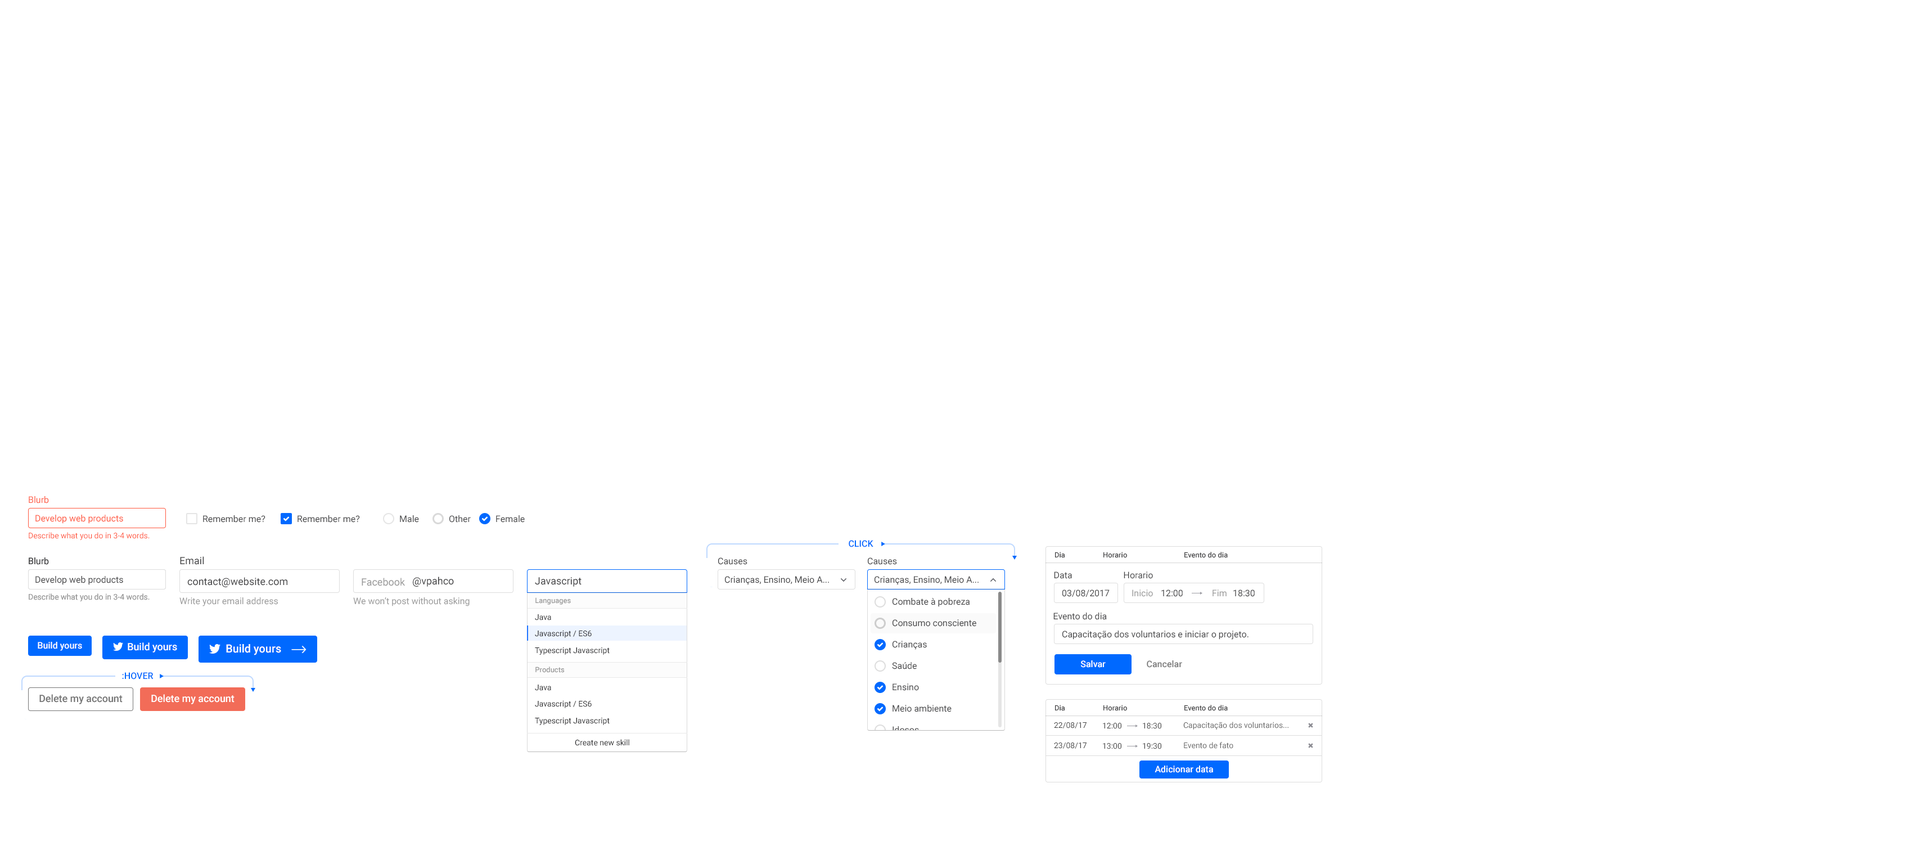
<style>
.page{position:relative;width:1920px;height:864px;background:#ffffff}
.page>*{position:absolute;margin:0}
.t1{font:9px "Roboto-Regular";color:#ff6149}
.t2{font:9px "Roboto-Regular";color:#ff583f}
.t3{font:9px "Roboto-Regular";color:#464648}
.t4{font:7.9px "Roboto-Regular";color:#ff583f}
.t5{font:9px "Roboto-Medium";color:#0069ff;text-transform:uppercase}
.t6{font:10.1px "Roboto-Regular";color:#464648}
.t7{font:7.3px "Roboto-Medium";color:#464648}
.t8{font:10.1px "Roboto-Regular";color:#999999}
.t9{font:7.9px "Roboto-Regular";color:#999999}
.t10{font:9px "Roboto-Regular";color:#999999}
.t11{font:7.3px "Roboto-Medium";color:#999999}
.t12{font:7.9px "Roboto-Regular";color:#262628}
.t13{font:9px "Roboto-Medium";color:#ffffff}
.t14{font:10.1px "Roboto-Medium";color:#ffffff}
.t15{font:11.3px "Roboto-Medium";color:#ffffff}
.t16{font:9px "Roboto-Medium";color:#777777}
.t17{font:10.1px "Roboto-Medium";color:#757575}
.t18{font:7.9px "Roboto-Regular";color:#444444}
.t19{font:7.9px "Roboto-Regular";color:#666666}
.t20{font:9px "Roboto-Regular"}
</style>
<div class="page">
<p class="t1" style="left:29px;top:496px;width:20px;height:7px">Blurb</p>
<p class="t2" style="left:35px;top:515px;width:88px;height:9px">Develop web products</p>
<p class="t3" style="left:203px;top:515px;width:63px;height:8px">Remember me?</p>
<p class="t3" style="left:298px;top:515px;width:62px;height:8px">Remember me?</p>
<p class="t3" style="left:400px;top:515px;width:19px;height:8px">Male</p>
<p class="t3" style="left:449px;top:515px;width:22px;height:8px">Other</p>
<p class="t3" style="left:496px;top:515px;width:29px;height:8px">Female</p>
<p class="t4" style="left:29px;top:532px;width:121px;height:8px">Describe what you do in 3-4 words.</p>
<p class="t5" style="left:849px;top:540px;width:25px;height:7px">click</p>
<p class="t3" style="left:29px;top:557px;width:20px;height:8px">Blurb</p>
<p class="t3" style="left:29px;top:557px;width:20px;height:8px">Blurb</p>
<p class="t6" style="left:180px;top:556px;width:24px;height:9px">Email</p>
<p class="t3" style="left:718px;top:557px;width:30px;height:8px">Causes</p>
<p class="t3" style="left:868px;top:557px;width:29px;height:8px">Causes</p>
<p class="t7" style="left:1055px;top:552px;width:10px;height:6px">Dia</p>
<p class="t7" style="left:1104px;top:552px;width:23px;height:6px">Horario</p>
<p class="t7" style="left:1185px;top:552px;width:43px;height:6px">Evento do dia</p>
<p class="t3" style="left:35px;top:576px;width:88px;height:9px">Develop web products</p>
<p class="t3" style="left:35px;top:576px;width:88px;height:9px">Develop web products</p>
<p class="t6" style="left:187px;top:577px;width:100px;height:10px">contact@website.com</p>
<p class="t8" style="left:362px;top:578px;width:43px;height:8px">Facebook</p>
<p class="t6" style="left:413px;top:577px;width:41px;height:10px">@vpahco</p>
<p class="t6" style="left:535px;top:577px;width:47px;height:10px">Javascript</p>
<p class="t3" style="left:725px;top:576px;width:104px;height:9px">Crianças, Ensino, Meio A...</p>
<p class="t3" style="left:875px;top:576px;width:104px;height:9px">Crianças, Ensino, Meio A...</p>
<p class="t3" style="left:1054px;top:572px;width:18px;height:7px">Data</p>
<p class="t3" style="left:1124px;top:572px;width:29px;height:7px">Horario</p>
<p class="t9" style="left:29px;top:593px;width:121px;height:8px">Describe what you do in 3-4 words.</p>
<p class="t9" style="left:29px;top:593px;width:121px;height:8px">Describe what you do in 3-4 words.</p>
<p class="t3" style="left:1063px;top:590px;width:47px;height:7px">03/08/2017</p>
<p class="t10" style="left:1132px;top:590px;width:21px;height:7px">Inicio</p>
<p class="t3" style="left:1162px;top:590px;width:21px;height:7px">12:00</p>
<p class="t10" style="left:1213px;top:590px;width:14px;height:6px">Fim</p>
<p class="t3" style="left:1234px;top:590px;width:21px;height:7px">18:30</p>
<p class="t10" style="left:179px;top:597px;width:99px;height:9px">Write your email address</p>
<p class="t10" style="left:353px;top:597px;width:117px;height:9px">We won’t post without asking</p>
<p class="t11" style="left:536px;top:597px;width:35px;height:8px">Languages</p>
<p class="t3" style="left:893px;top:598px;width:77px;height:9px">Combate à pobreza</p>
<p class="t12" style="left:535px;top:614px;width:16px;height:6px">Java</p>
<p class="t3" style="left:1054px;top:613px;width:53px;height:7px">Evento do dia</p>
<p class="t12" style="left:535px;top:630px;width:57px;height:8px">Javascript / ES6</p>
<p class="t3" style="left:893px;top:619px;width:83px;height:8px">Consumo consciente</p>
<p class="t13" style="left:38px;top:642px;width:44px;height:9px">Build yours</p>
<p class="t3" style="left:893px;top:641px;width:34px;height:9px">Crianças</p>
<p class="t3" style="left:1063px;top:631px;width:186px;height:9px">Capacitação dos voluntarios e iniciar o projeto.</p>
<p class="t14" style="left:128px;top:642px;width:49px;height:10px">Build yours</p>
<p class="t15" style="left:226px;top:644px;width:55px;height:11px">Build yours</p>
<p class="t12" style="left:535px;top:647px;width:75px;height:8px">Typescript Javascript</p>
<p class="t3" style="left:892px;top:662px;width:25px;height:7px">Saúde</p>
<p class="t13" style="left:1081px;top:660px;width:25px;height:8px">Salvar</p>
<p class="t16" style="left:1147px;top:660px;width:35px;height:8px">Cancelar</p>
<p class="t5" style="left:122px;top:672px;width:32px;height:8px">:HOVER</p>
<p class="t11" style="left:536px;top:667px;width:29px;height:6px">Products</p>
<p class="t12" style="left:535px;top:685px;width:16px;height:6px">Java</p>
<p class="t3" style="left:893px;top:683px;width:26px;height:8px">Ensino</p>
<p class="t17" style="left:39px;top:694px;width:84px;height:10px">Delete my account</p>
<p class="t14" style="left:151px;top:694px;width:84px;height:10px">Delete my account</p>
<p class="t12" style="left:535px;top:700px;width:57px;height:8px">Javascript / ES6</p>
<p class="t3" style="left:893px;top:705px;width:59px;height:7px">Meio ambiente</p>
<p class="t7" style="left:1055px;top:705px;width:10px;height:6px">Dia</p>
<p class="t7" style="left:1104px;top:705px;width:23px;height:6px">Horario</p>
<p class="t7" style="left:1185px;top:705px;width:43px;height:6px">Evento do dia</p>
<p class="t12" style="left:535px;top:717px;width:75px;height:8px">Typescript Javascript</p>
<p class="t18" style="left:1054px;top:722px;width:33px;height:6px">22/08/17</p>
<p class="t18" style="left:1103px;top:723px;width:19px;height:6px">12:00</p>
<p class="t18" style="left:1143px;top:723px;width:19px;height:6px">18:30</p>
<p class="t19" style="left:1184px;top:722px;width:105px;height:8px">Capacitação dos voluntarios...</p>
<p class="t20" style="left:893px;top:726px;width:26px;height:8px">Idosos</p>
<p class="t12" style="left:575px;top:739px;width:54px;height:7px">Create new skill</p>
<p class="t18" style="left:1054px;top:742px;width:33px;height:7px">23/08/17</p>
<p class="t18" style="left:1103px;top:743px;width:19px;height:6px">13:00</p>
<p class="t18" style="left:1143px;top:743px;width:19px;height:6px">19:30</p>
<p class="t19" style="left:1184px;top:742px;width:50px;height:7px">Evento de fato</p>
<p class="t13" style="left:1155px;top:766px;width:58px;height:7px">Adicionar data</p>
</div>
